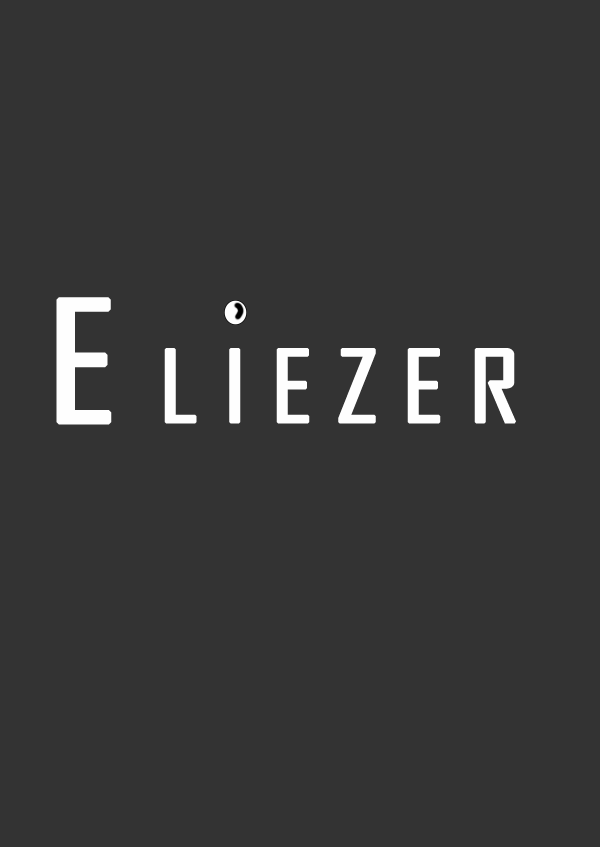
<style>
.page{position:relative;width:600px;height:847px;background:#333333}
.page>*{position:absolute;margin:0}
.t1{font:95px "AgencyFB-Reg";letter-spacing:0.18em;color:#fefefe;font-weight:bold;scale:1.24 1}
.t2{font:160px "AgencyFB-Reg";letter-spacing:0.18em;color:#fefefe;font-weight:bold;scale:1.24 1}
</style>
<div class="page">
<p class="t1" style="left:56px;top:297px;width:460px;height:128px"><span class="t2">E</span>LIEZER</p>
</div>
